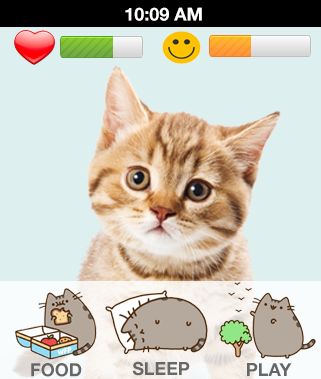
<style>
.page{position:relative;width:321px;height:379px;background:#ddefef}
.page>*{position:absolute;margin:0}
.t1{font:18px "HelveticaNeue-Bold";color:#ffffff}
.t2{font:18px "HelveticaNeue-Bold";color:#676767}
</style>
<div class="page">
<p class="t1" style="left:125px;top:7px;width:77px;height:14px">10:09 AM</p>
<p class="t2" style="left:31px;top:363px;width:51px;height:14px">FOOD</p>
<p class="t2" style="left:132px;top:361px;width:58px;height:15px">SLEEP</p>
<p class="t2" style="left:247px;top:363px;width:45px;height:13px">PLAY</p>
</div>
